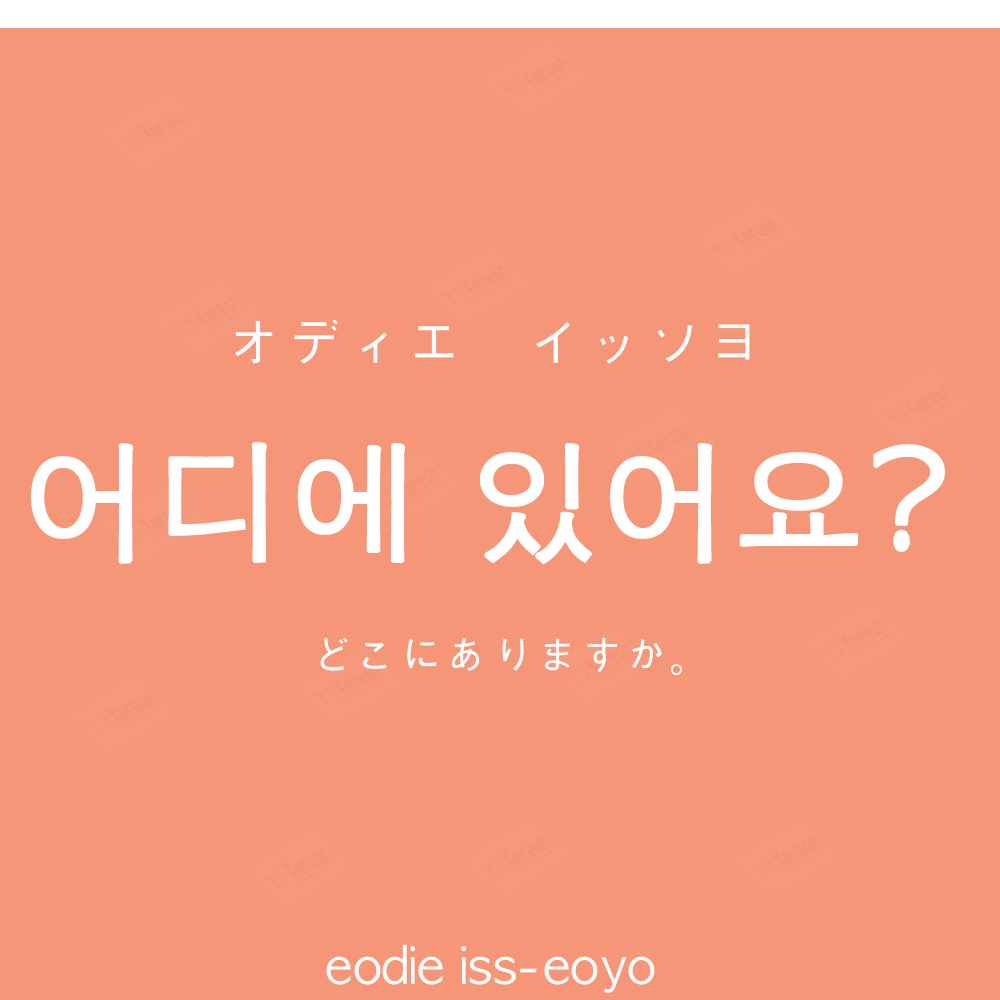
<style>
.page{position:relative;width:1000px;height:1000px;background:#f69679}
.page>*{position:absolute;margin:0}
.t1{font:60px "AppleGothic";color:#ffffff}
.t2{font:130px "AppleGothic";color:#ffffff;font-weight:bold}
.t3{font:45px "AppleGothic";color:#ffffff}
.t4{font:50px "AppleGothic";color:#ffffff}
</style>
<div class="page">
<p class="t1" style="left:235px;top:319px;width:515px;height:45px">オディエ　イッソヨ</p>
<p class="t2" style="left:31px;top:442px;width:914px;height:123px">어디에 있어요?</p>
<p class="t3" style="left:320px;top:637px;width:362px;height:39px">どこにありますか。</p>
<p class="t4" style="left:326px;top:944px;width:329px;height:49px">eodie iss-eoyo</p>
</div>
